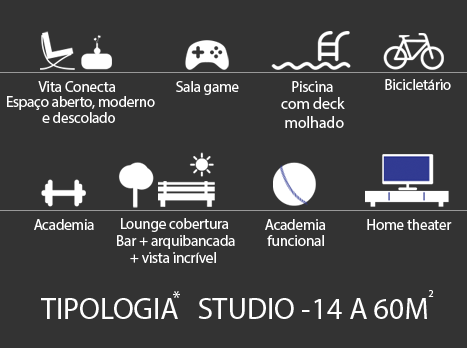
<style>
.page{position:relative;width:467px;height:348px;background:#333333}
.page>*{position:absolute;margin:0}
.t1{font:15px "MyriadPro-Regular";letter-spacing:-0.009em;color:#ffffff}
.t2{font:15px "MyriadPro-Regular";letter-spacing:-0.03em;color:#ffffff}
.t3{font:15px "MyriadPro-Regular";letter-spacing:-0.01em;color:#ffffff}
.t4{font:15px "MyriadPro-Regular";letter-spacing:-0.02em;color:#ffffff}
.t5{font:15px "MyriadPro-Regular";color:#ffffff}
.t6{font:15px "MyriadPro-Regular";letter-spacing:-0.019em;color:#ffffff}
.t7{font:16px "MyriadPro-Regular";letter-spacing:-0.009em;color:#ffffff}
.t8{font:16px "MyriadPro-Regular";letter-spacing:-0.019em;color:#ffffff}
.t9{font:16px "MyriadPro-Regular";letter-spacing:-0.01em;color:#ffffff}
.t10{font:16px "MyriadPro-Regular";color:#ffffff}
.t11{font:15px "MyriadPro-Regular";letter-spacing:-0.032em;color:#ffffff}
.t12{font:15px "MyriadPro-Regular";letter-spacing:-0.059em;color:#ffffff}
.t13{font:15px "MyriadPro-Regular";letter-spacing:-0.022em;color:#ffffff}
.t14{font:15px "MyriadPro-Regular";letter-spacing:-0.025em;color:#ffffff}
.t15{font:15px "MyriadPro-Regular";letter-spacing:0.01em;color:#ffffff}
.t16{font:15px "MyriadPro-Regular";letter-spacing:-0.014em;color:#ffffff}
.t17{font:15px "MyriadPro-Regular";letter-spacing:-0.029em;color:#ffffff}
.t18{font:20px "MyriadPro-Regular";color:#ffffff}
.t19{font:10px "MyriadPro-Regular";color:#ffffff}
.t20{font:30px "MyriadPro-Regular";color:#ffffff}
.t21{font:30px "MyriadPro-Regular";letter-spacing:-0.039em;color:#ffffff}
.t22{font:30px "MyriadPro-Regular";letter-spacing:-0.014em;color:#ffffff}
</style>
<div class="page">
<p class="t1" style="left:38px;top:81px;width:78px;height:11px"><span class="t2">V</span>i<span class="t3">t</span>a <span class="t4">C</span><span class="t3">o</span>nec<span class="t3">t</span><span class="t5">a</span></p>
<p class="t1" style="left:176px;top:81px;width:63px;height:14px">S<span class="t3">al</span>a ga<span class="t3">m</span><span class="t5">e</span></p>
<p class="t1" style="left:292px;top:81px;width:41px;height:11px"><span class="t3">P</span>iscin<span class="t5">a</span></p>
<p class="t1" style="left:385px;top:79px;width:66px;height:11px">B<span class="t3">i</span>c<span class="t3">i</span>c<span class="t3">l</span>e<span class="t3">t</span>ár<span class="t3">i</span><span class="t5">o</span></p>
<p class="t3" style="left:7px;top:96px;width:148px;height:14px"><span class="t1">E</span>s<span class="t1">p</span>a<span class="t4">ç</span>o a<span class="t1">b</span>e<span class="t1">r</span><span class="t6">t</span><span class="t2">o</span><span class="t1">, m</span>o<span class="t1">d</span>er<span class="t1">n</span><span class="t5">o</span></p>
<p class="t7" style="left:281px;top:97px;width:64px;height:31px;text-align:center"><span class="t8">c</span>om d<span class="t9">e</span>c<span class="t9">k <br></span>mo<span class="t9">l</span>h<span class="t9">a</span>d<span class="t10">o</span></p>
<p class="t1" style="left:42px;top:112px;width:73px;height:11px"><span class="t3">e</span> de<span class="t3">s</span><span class="t6">c</span><span class="t3">ol</span>ad<span class="t5">o</span></p>
<p class="t1" style="left:34px;top:219px;width:60px;height:11px"><span class="t11">A</span>c<span class="t3">a</span>dem<span class="t3">i</span><span class="t5">a</span></p>
<p class="t1" style="left:121px;top:218px;width:108px;height:14px"><span class="t12">L</span><span class="t3">o</span>unge <span class="t13">c</span>o<span class="t3">b</span>ert<span class="t3">u</span><span class="t14">r</span><span class="t5">a</span></p>
<p class="t1" style="left:265px;top:219px;width:61px;height:11px"><span class="t11">A</span>c<span class="t3">a</span>de<span class="t3">mi</span><span class="t5">a</span></p>
<p class="t1" style="left:367px;top:219px;width:85px;height:11px">Home <span class="t3">t</span>he<span class="t4">at</span>e<span class="t5">r</span></p>
<p class="t3" style="left:117px;top:235px;width:118px;height:14px"><span class="t15">B</span>ar + a<span class="t16">r</span><span class="t1">q</span>u<span class="t1">ib</span>a<span class="t1">nc</span>a<span class="t1">d</span>a</p>
<p class="t1" style="left:267px;top:235px;width:57px;height:11px"><span class="t3">f</span>unci<span class="t3">o</span>na<span class="t5">l</span></p>
<p class="t1" style="left:130px;top:252px;width:86px;height:11px">+ vi<span class="t6">s</span><span class="t3">t</span>a <span class="t3">i</span>nc<span class="t3">r</span>í<span class="t17">v</span><span class="t3">e</span><span class="t5">l</span></p>
<p class="t18" style="left:173px;top:291px;width:7px;height:7px">*</p>
<p class="t19" style="left:428px;top:290px;width:6px;height:7px">2</p>
<p class="t20" style="left:41px;top:298px;width:137px;height:21px">TIPO<span class="t21">L</span>OGIA</p>
<p class="t20" style="left:198px;top:298px;width:112px;height:21px"><span class="t22">S</span>TUDIO -</p>
<p class="t20" style="left:314px;top:298px;width:113px;height:21px">14 A 60M</p>
</div>
